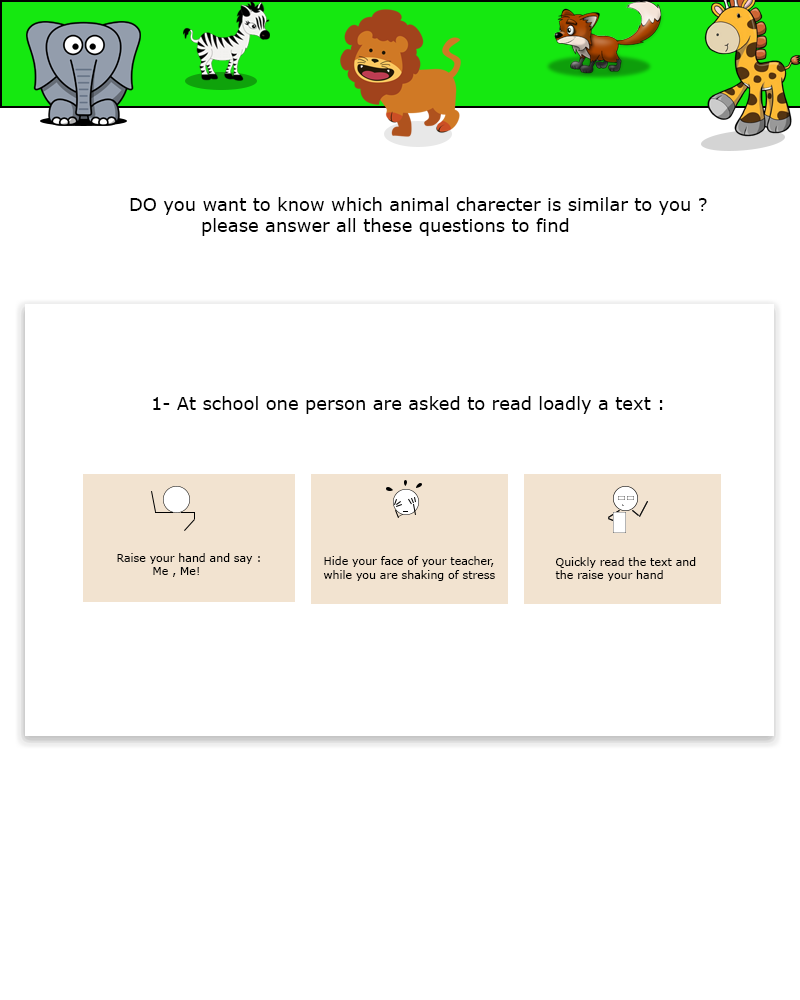
<style>
.page{position:relative;width:800px;height:1000px;background:#ffffff}
.page>*{position:absolute;margin:0}
.t1{font:18px "Verdana";color:#000000}
.t2{font:11px "Verdana";color:#000000}
</style>
<div class="page">
<p class="t1" style="left:130px;top:197px;width:577px;height:39px">DO you want to know which animal charecter is similar to you ? <br>  please answer all these questions to find</p>
<p class="t1" style="left:153px;top:396px;width:510px;height:18px">1- At school one person are asked to read loadly a text :</p>
<p class="t2" style="left:117px;top:553px;width:143px;height:24px">Raise your hand and say : <br> Me , Me!</p>
<p class="t2" style="left:323px;top:556px;width:172px;height:25px">Hide your face of your teacher, <br>while you are shaking of stress</p>
<p class="t2" style="left:555px;top:557px;width:141px;height:24px">Quickly read the text and <br>the raise your hand</p>
</div>
